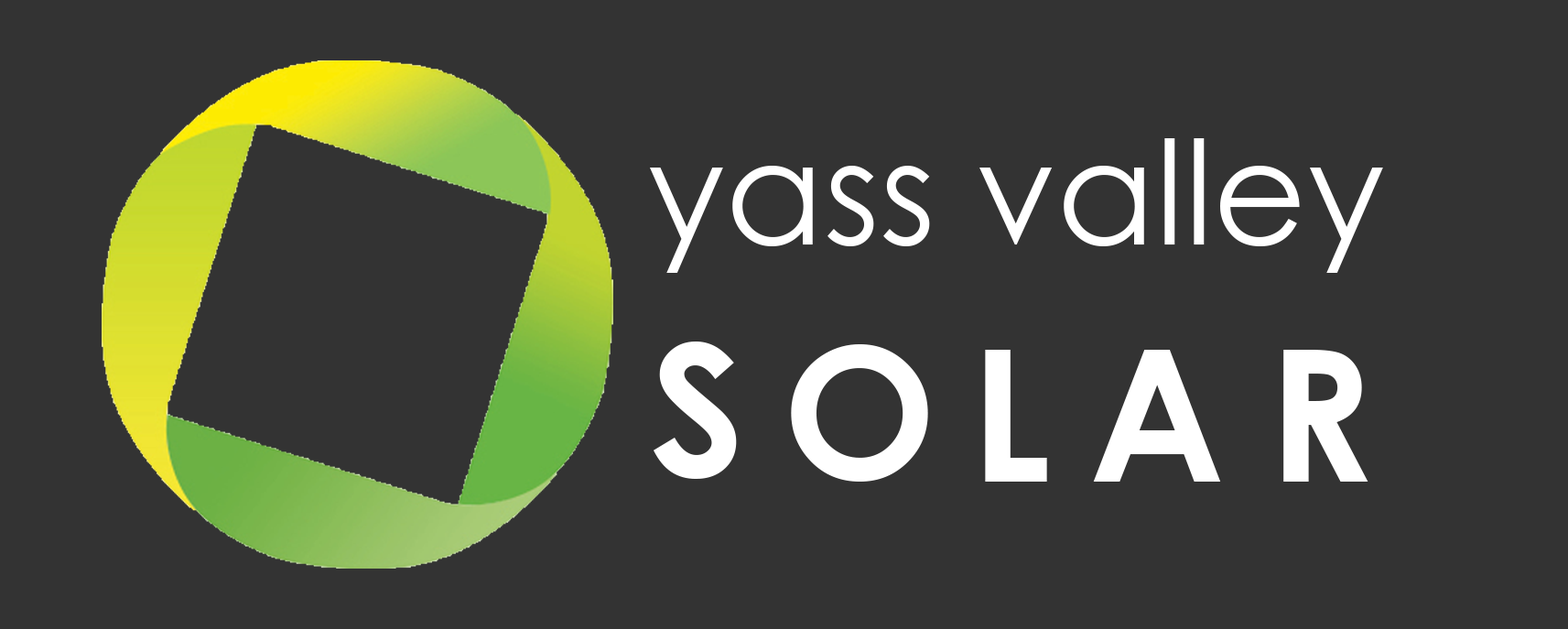
<style>
.page{position:relative;width:1568px;height:629px;background:#333333}
.page>*{position:absolute;margin:0}
.t1{font:144.6px "CenturyGothic";color:#ffffff}
.t2{font:183.1px "CenturyGothic-Bold";color:#ffffff}
</style>
<div class="page">
<p class="t1" style="left:650px;top:138px;width:733px;height:135px">yass valley</p>
<p class="t2" style="left:654px;top:341px;width:83px;height:138px">S</p>
<p class="t2" style="left:791px;top:344px;width:137px;height:137px">O</p>
<p class="t2" style="left:985px;top:350px;width:62px;height:131px">L</p>
<p class="t2" style="left:1093px;top:350px;width:128px;height:131px">A</p>
<p class="t2" style="left:1283px;top:350px;width:85px;height:131px">R</p>
</div>
